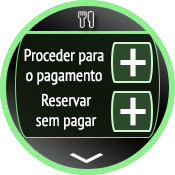
<style>
.page{position:relative;width:175px;height:175px;background:#ffffff}
.page>*{position:absolute;margin:0}
.t1{font:17px/20px "PTSans-Narrow";color:#ffffff}
.t2{font:72px "PTSans-Narrow";color:#ffffff}
.t3{font:17px/20px "PTSans-Narrow"}
</style>
<div class="page">
<p class="t1" style="left:24px;top:48px;width:80px;height:37px;text-align:center">Proceder para<br>o pagamento</p>
<p class="t2" style="left:120px;top:48px;width:26px;height:29px">+</p>
<p class="t2" style="left:120px;top:48px;width:26px;height:29px">+</p>
<p class="t3" style="left:36px;top:94px;width:61px;height:37px;text-align:center">Reservar <br>sem pagar</p>
<p class="t1" style="left:36px;top:93px;width:61px;height:37px;text-align:center">Reservar<br>sem pagar</p>
<p class="t2" style="left:120px;top:97px;width:26px;height:29px">+</p>
<p class="t2" style="left:120px;top:97px;width:26px;height:29px">+</p>
</div>
